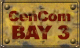
<style>
.page{position:relative;width:80px;height:48px}
.page>*{position:absolute;margin:0}
.t1{font:14px "Arial-Black";letter-spacing:-0.04em;font-weight:bold}
.t2{font:19px "Arial-Black";letter-spacing:-0.06em;color:#681505;font-weight:bold}
</style>
<div class="page">
<p class="t1" style="left:8px;top:10px;width:63px;height:12px">CenCom</p>
<p class="t2" style="left:12px;top:25px;width:58px;height:15px">BAY 3</p>
</div>
